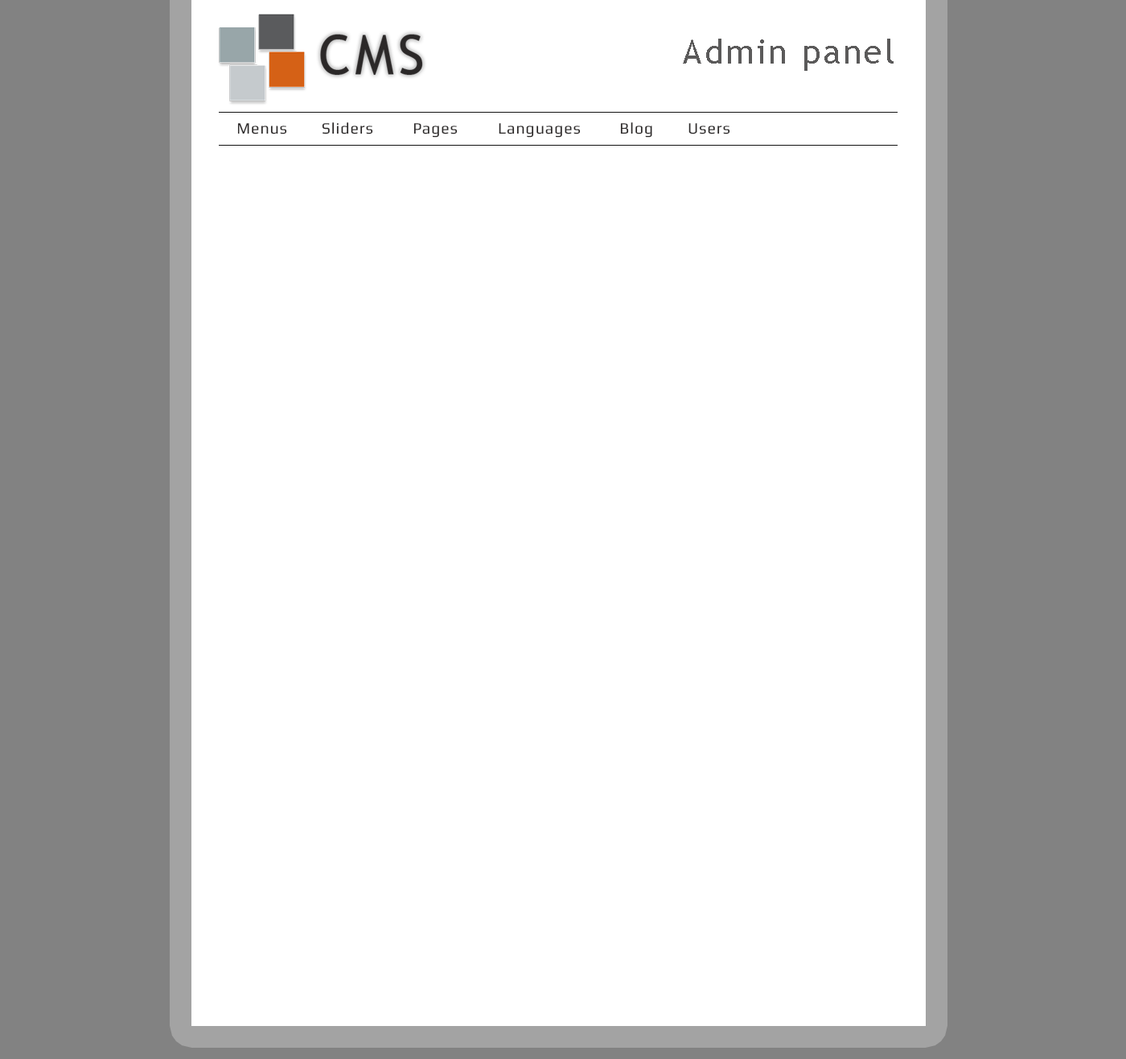
<style>
.page{position:relative;width:1126px;height:1059px;background:#ffffff}
.page>*{position:absolute;margin:0}
.t1{font:33.5px "TrebuchetMS";letter-spacing:0.075em;color:#5a5b5d}
.t2{font:15.6px "Play";letter-spacing:0.05em;color:#2b2828}
</style>
<div class="page">
<p class="t1" style="left:683px;top:39px;width:211px;height:32px">Admin panel</p>
<p class="t2" style="left:237px;top:123px;width:50px;height:11px">Menus</p>
<p class="t2" style="left:322px;top:122px;width:51px;height:12px">Sliders</p>
<p class="t2" style="left:414px;top:123px;width:44px;height:15px">Pages</p>
<p class="t2" style="left:499px;top:123px;width:82px;height:15px">Languages</p>
<p class="t2" style="left:620px;top:122px;width:32px;height:16px">Blog</p>
<p class="t2" style="left:689px;top:123px;width:41px;height:11px">Users</p>
</div>
